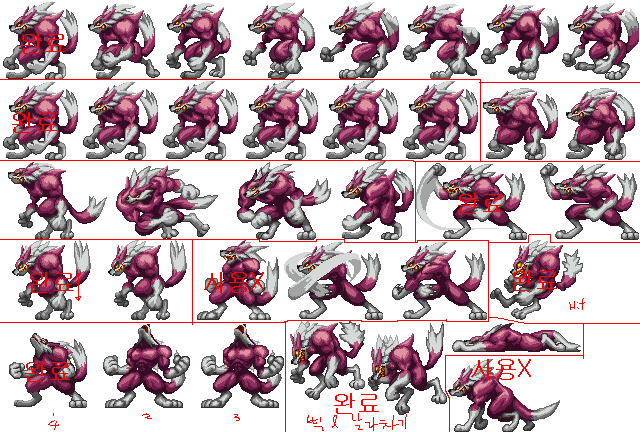
<style>
.page{position:relative;width:640px;height:432px;background:#ffffff}
.page>*{position:absolute;margin:0}
.t1{font:24px "Gulim";color:#ff0000}
</style>
<div class="page">
<p class="t1" style="left:21px;top:33px;width:45px;height:21px">완료</p>
<p class="t1" style="left:12px;top:112px;width:45px;height:21px">완료</p>
<p class="t1" style="left:458px;top:193px;width:45px;height:21px">완료</p>
<p class="t1" style="left:512px;top:270px;width:45px;height:21px">완료</p>
<p class="t1" style="left:29px;top:272px;width:45px;height:21px">완료</p>
<p class="t1" style="left:204px;top:272px;width:60px;height:21px">사용X</p>
<p class="t1" style="left:25px;top:361px;width:45px;height:21px">완료</p>
<p class="t1" style="left:471px;top:359px;width:60px;height:21px">사용X</p>
<p class="t1" style="left:334px;top:393px;width:45px;height:21px">완료</p>
</div>
